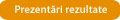
<style>
.page{position:relative;width:120px;height:20px;background:#e68d00}
.page>*{position:absolute;margin:0}
.t1{font:11px "MyriadPro-Semibold";color:#ffffff}
</style>
<div class="page">
<p class="t1" style="left:15px;top:5px;width:92px;height:8px">Prezentări rezultate</p>
</div>
